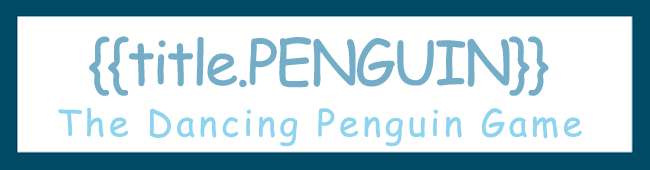
<style>
.page{position:relative;width:650px;height:170px;background:#ffffff}
.page>*{position:absolute;margin:0}
.t1{font:60.2px "ComicSansMS";letter-spacing:-0.05em;color:#74adc8}
.t2{font:36.1px "ComicSansMS";letter-spacing:0.1em;color:#8ed4ee}
</style>
<div class="page">
<p class="t1" style="left:89px;top:36px;width:460px;height:60px">{{title.PENGUIN}}</p>
<p class="t2" style="left:58px;top:107px;width:524px;height:40px">The Dancing Penguin Game</p>
</div>
